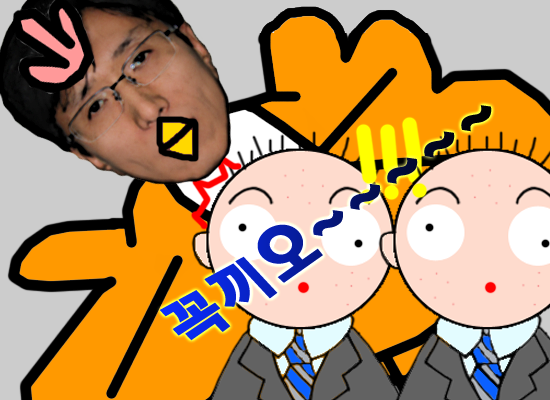
<style>
.page{position:relative;width:550px;height:400px;background:#ff9900}
.page>*{position:absolute;margin:0}
.t1{font:60.2px "RixComingsoonB";letter-spacing:0.05em}
</style>
<div class="page">
<p class="t1" style="left:159px;top:105px;width:333px;height:236px;rotate:-35deg">꼭끼오~~~~~</p>
</div>
